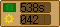
<style>
.page{position:relative;width:60px;height:27px;background:#caa364}
.page>*{position:absolute;margin:0}
.t1{font:11px "XENOA";letter-spacing:-0.002em;color:#000000}
.t2{font:11px "XENOA";color:#000000}
</style>
<div class="page">
<p class="t1" style="left:21px;top:3px;width:23px;height:9px">538s</p>
<p class="t2" style="left:21px;top:15px;width:17px;height:9px">042</p>
</div>
